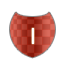
<style>
.page{position:relative;width:64px;height:64px;background:#ffffff}
.page>*{position:absolute;margin:0}
.t1{font:24px "Corbel";color:#ffffff}
</style>
<div class="page">
<p class="t1" style="left:31px;top:28px;width:3px;height:16px">I</p>
</div>
